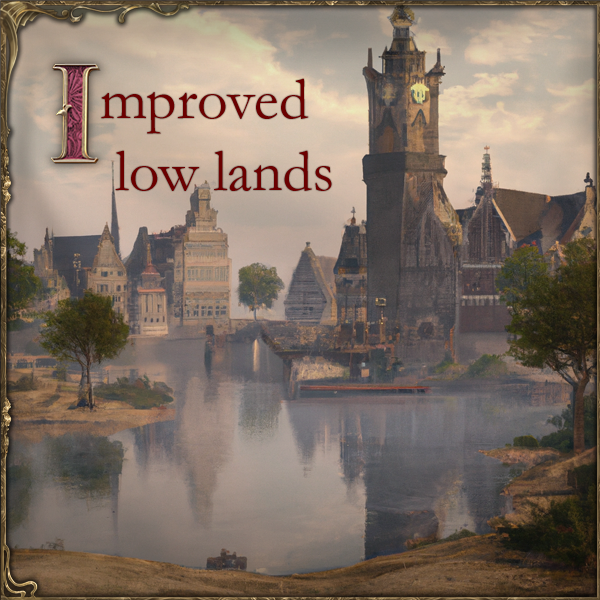
<style>
.page{position:relative;width:600px;height:600px}
.page>*{position:absolute;margin:0}
.t1{font:60px "Garamond";color:#6b0000}
</style>
<div class="page">
<p class="t1" style="left:101px;top:78px;width:231px;height:113px">mproved<br> low lands</p>
</div>
